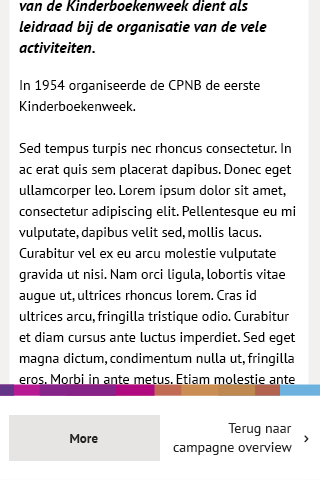
<style>
.page{position:relative;width:320px;height:480px;background:#ffffff}
.page>*{position:absolute;margin:0}
.t1{font:14px/21px "PTSans-Regular";color:#000000}
.t2{font:16px/21px "PTSans-BoldItalic";color:#000000}
.t3{font:14px/19px "PTSans-Regular";color:#222221}
.t4{font:13px "PTSans-Bold";color:#222222}
</style>
<div class="page">
<p class="t1" style="left:19px;top:0px;width:277px;height:471px"><span class="t2">van de Kinderboekenweek dient als leidraad bij de organisatie van de vele activiteiten.<br><br></span>In 1954 organiseerde de CPNB de eerste Kinderboekenweek.<br> <br>Sed tempus turpis nec rhoncus consectetur. In ac erat quis sem placerat dapibus. Donec eget ullamcorper leo. Lorem ipsum dolor sit amet, consectetur adipiscing elit. Pellentesque eu mi vulputate, dapibus velit sed, mollis lacus. Curabitur vel ex eu arcu molestie vulputate gravida ut nisi. Nam orci ligula, lobortis vitae augue ut, ultrices rhoncus lorem. Cras id ultrices arcu, fringilla tristique odio. Curabitur et diam cursus ante luctus imperdiet. Sed eget magna dictum, condimentum nulla ut, fringilla eros. Morbi in ante metus. Etiam molestie ante sit amet diam bibendum commodo. Sed vitae erat iaculis, auctor nisl eu, vestibulum erat. Phasellus nec orci felis. Mauris mi erat, pretium in metus vel, tincidunt pharetra mi.</p>
<p class="t3" style="left:173px;top:423px;width:119px;height:32px;text-align:right">Terug naar<br>campagne overview</p>
<p class="t4" style="left:70px;top:434px;width:28px;height:9px">More</p>
</div>
